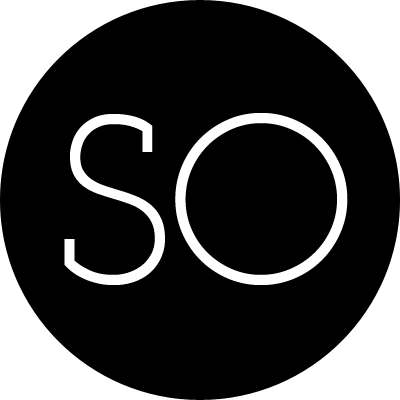
<style>
.page{position:relative;width:400px;height:400px;background:#000000}
.page>*{position:absolute;margin:0}
.t1{font:240.4px "JosefinSlab";color:#ffffff}
</style>
<div class="page">
<p class="t1" style="left:64px;top:113px;width:284px;height:172px">SO</p>
</div>
